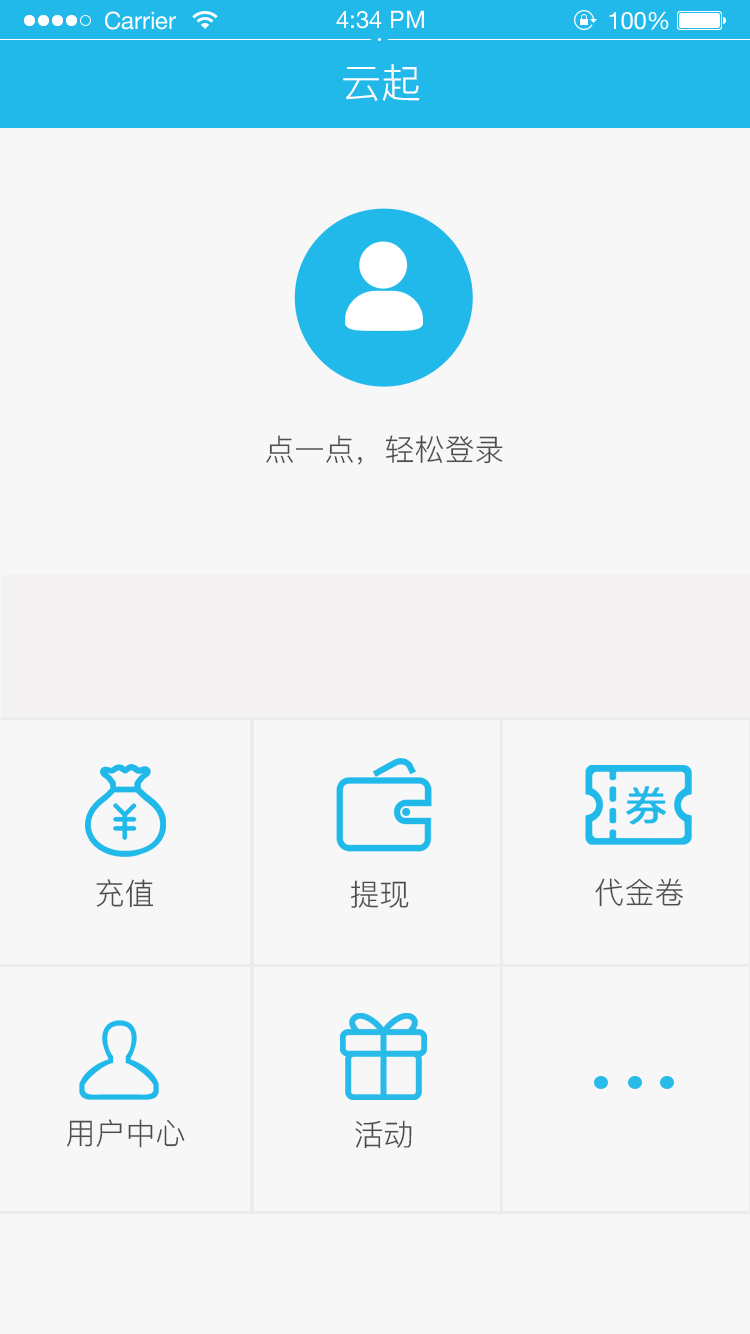
<style>
.page{position:relative;width:750px;height:1334px;background:#f7f7f7}
.page>*{position:absolute;margin:0}
.t1{font:40px "PingFang-SC-Regular";color:#ffffff}
.t2{font:30px "PingFang-SC-Regular";color:#4c4d4e}
</style>
<div class="page">
<p class="t1" style="left:343px;top:64px;width:77px;height:38px">云起</p>
<p class="t2" style="left:266px;top:435px;width:237px;height:30px">点一点，轻松登录</p>
<p class="t2" style="left:96px;top:879px;width:58px;height:29px">充值</p>
<p class="t2" style="left:351px;top:880px;width:58px;height:28px">提现</p>
<p class="t2" style="left:595px;top:878px;width:88px;height:29px">代金卷</p>
<p class="t2" style="left:67px;top:1119px;width:118px;height:29px">用户中心</p>
<p class="t2" style="left:355px;top:1120px;width:57px;height:29px">活动</p>
</div>
